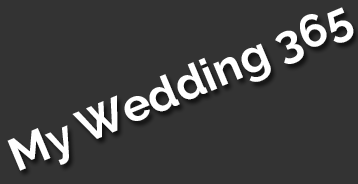
<style>
.page{position:relative;width:358px;height:184px;background:#333333}
.page>*{position:absolute;margin:0}
.t1{font:45.9px "Raleway-Bold";color:#ffffff}
</style>
<div class="page">
<p class="t1" style="left:7px;top:7px;width:347px;height:164px;rotate:-23deg">My Wedding 365</p>
</div>
